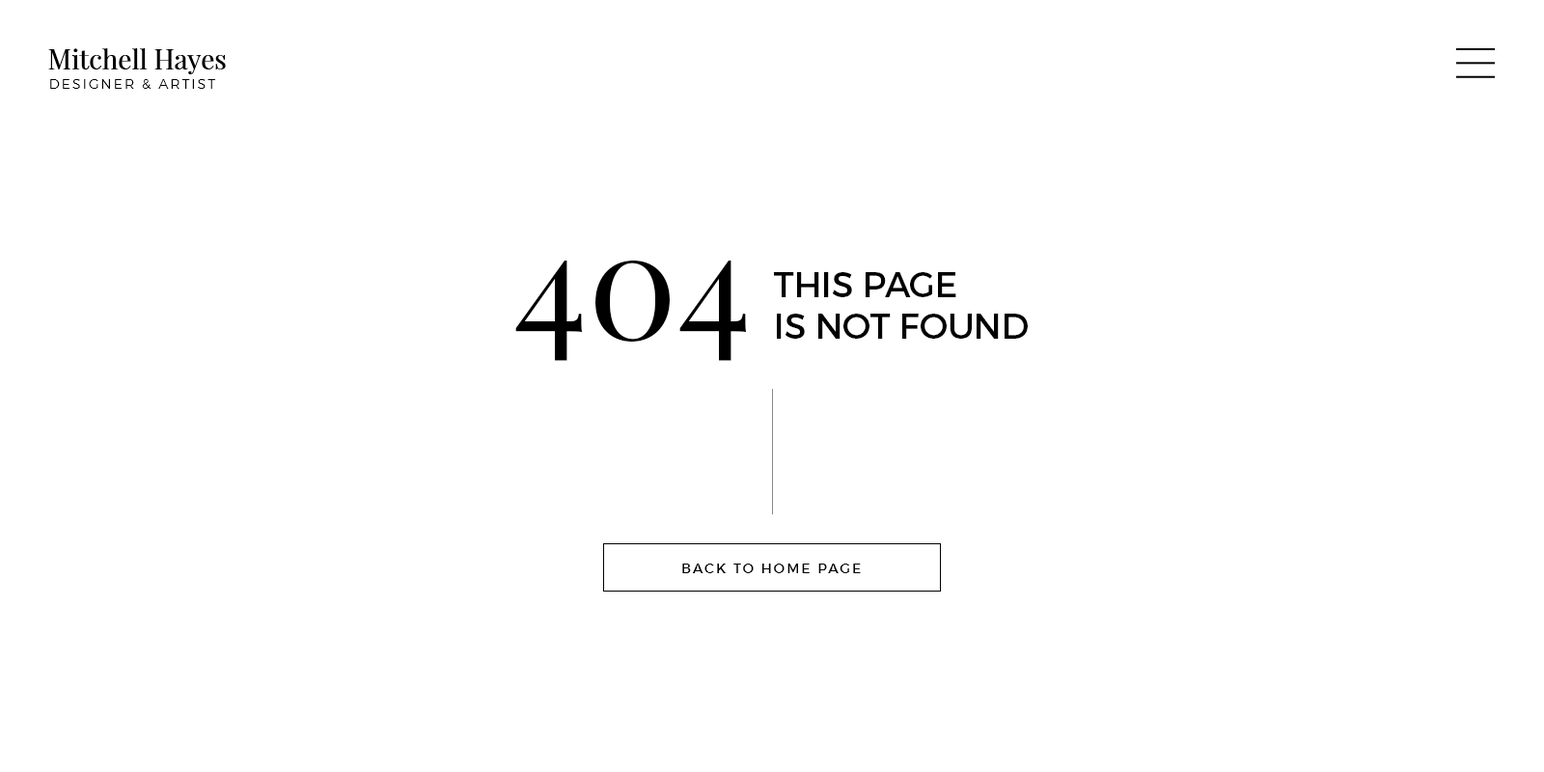
<style>
.page{position:relative;width:1544px;height:772px;background:#ffffff}
.page>*{position:absolute;margin:0}
.t1{font:27px "PlayfairDisplay-Regular";color:#000000}
.t2{font:13.5px "Montserrat-Light";letter-spacing:0.15em;color:#000000}
.t3{font:149.6px "PlayfairDisplay-Regular";color:#000000}
.t4{font:34.7px "Montserrat-Regular";color:#000000}
.t5{font:13.5px "Montserrat-Regular";letter-spacing:0.15em;color:#000000}
</style>
<div class="page">
<p class="t1" style="left:48px;top:48px;width:178px;height:26px">Mitchell Hayes</p>
<p class="t2" style="left:50px;top:79px;width:165px;height:10px">DESIGNER &amp; ARTIST</p>
<p class="t3" style="left:515px;top:261px;width:231px;height:100px">404</p>
<p class="t4" style="left:774px;top:272px;width:254px;height:67px">THIS PAGE<br>IS NOT FOUND</p>
<p class="t5" style="left:682px;top:564px;width:179px;height:9px">BACK TO HOME PAGE</p>
</div>
